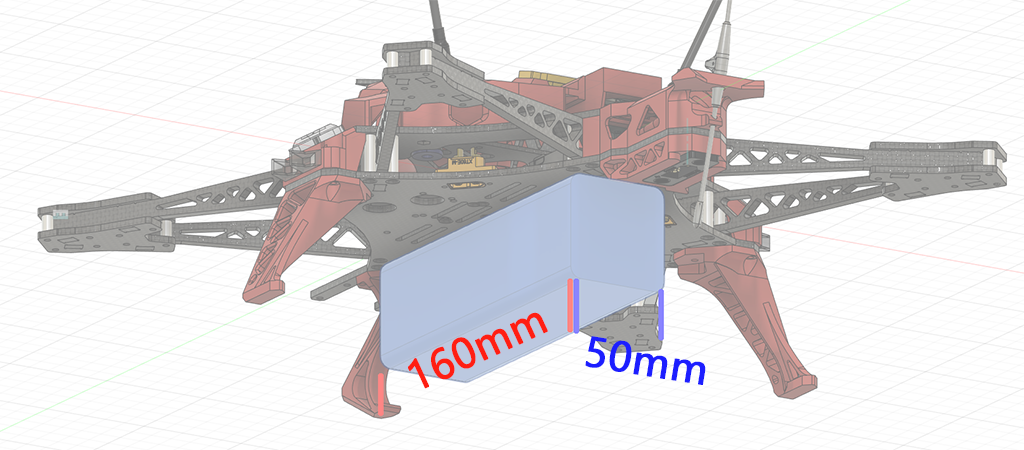
<style>
.page{position:relative;width:1024px;height:450px;background:#ffffff}
.page>*{position:absolute;margin:0}
.t1{font:39.6px "MicrosoftYaHei";color:#ff1e12;font-weight:bold}
.t2{font:39.6px "MicrosoftYaHei";color:#1c1eff;font-weight:bold}
</style>
<div class="page">
<p class="t1" style="left:408px;top:312px;width:140px;height:77px;rotate:-25deg">160mm</p>
<p class="t2" style="left:585px;top:336px;width:121px;height:49px;rotate:9deg">50mm</p>
</div>
